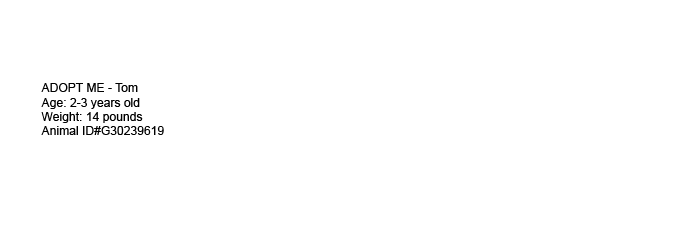
<style>
.page{position:relative;width:680px;height:250px;background:#ffffff}
.page>*{position:absolute;margin:0}
.t1{font:12px "ArialMT";letter-spacing:0.005em;color:#000000}
</style>
<div class="page">
<p class="t1" style="left:41px;top:83px;width:123px;height:52px">ADOPT ME - Tom<br>Age: 2-3 years old<br>Weight: 14 pounds<br>Animal ID#G30239619</p>
</div>
